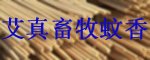
<style>
.page{position:relative;width:150px;height:60px}
.page>*{position:absolute;margin:0}
.t1{font:24px "SimSun";color:#0f0bc5;font-weight:bold}
</style>
<div class="page">
<p class="t1" style="left:1px;top:17px;width:147px;height:23px">艾真畜牧蚊香</p>
</div>
